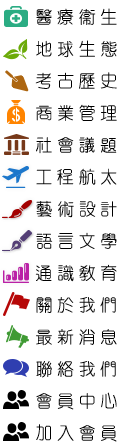
<style>
.page{position:relative;width:125px;height:448px;background:#ffffff}
.page>*{position:absolute;margin:0}
.t1{font:18px/32px "¥þ¯u²Ó¶êÅé";letter-spacing:0.2em;color:#000000}
</style>
<div class="page">
<p class="t1" style="left:35px;top:8px;width:82px;height:434px">醫療衛生<br>地球生態<br>考古歷史<br>商業管理<br>社會議題<br>工程航太<br>藝術設計<br>語言文學<br>通識教育<br>關於我們<br>最新消息<br>聯絡我們<br>會員中心<br>加入會員</p>
<p class="t1" style="left:35px;top:8px;width:82px;height:434px;opacity:0.37">醫療衛生<br>地球生態<br>考古歷史<br>商業管理<br>社會議題<br>工程航太<br>藝術設計<br>語言文學<br>通識教育<br>關於我們<br>最新消息<br>聯絡我們<br>會員中心<br>加入會員</p>
</div>
